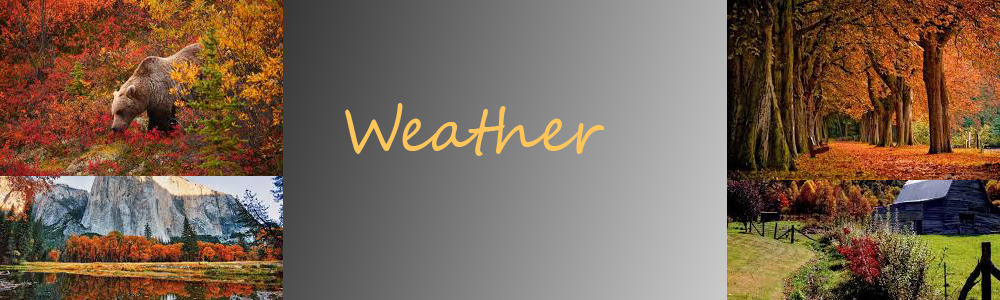
<style>
.page{position:relative;width:1000px;height:300px}
.page>*{position:absolute;margin:0}
.t1{font:60px "SegoeScript";color:#fec55a}
</style>
<div class="page">
<p class="t1" style="left:345px;top:103px;width:259px;height:53px">Weather</p>
</div>
